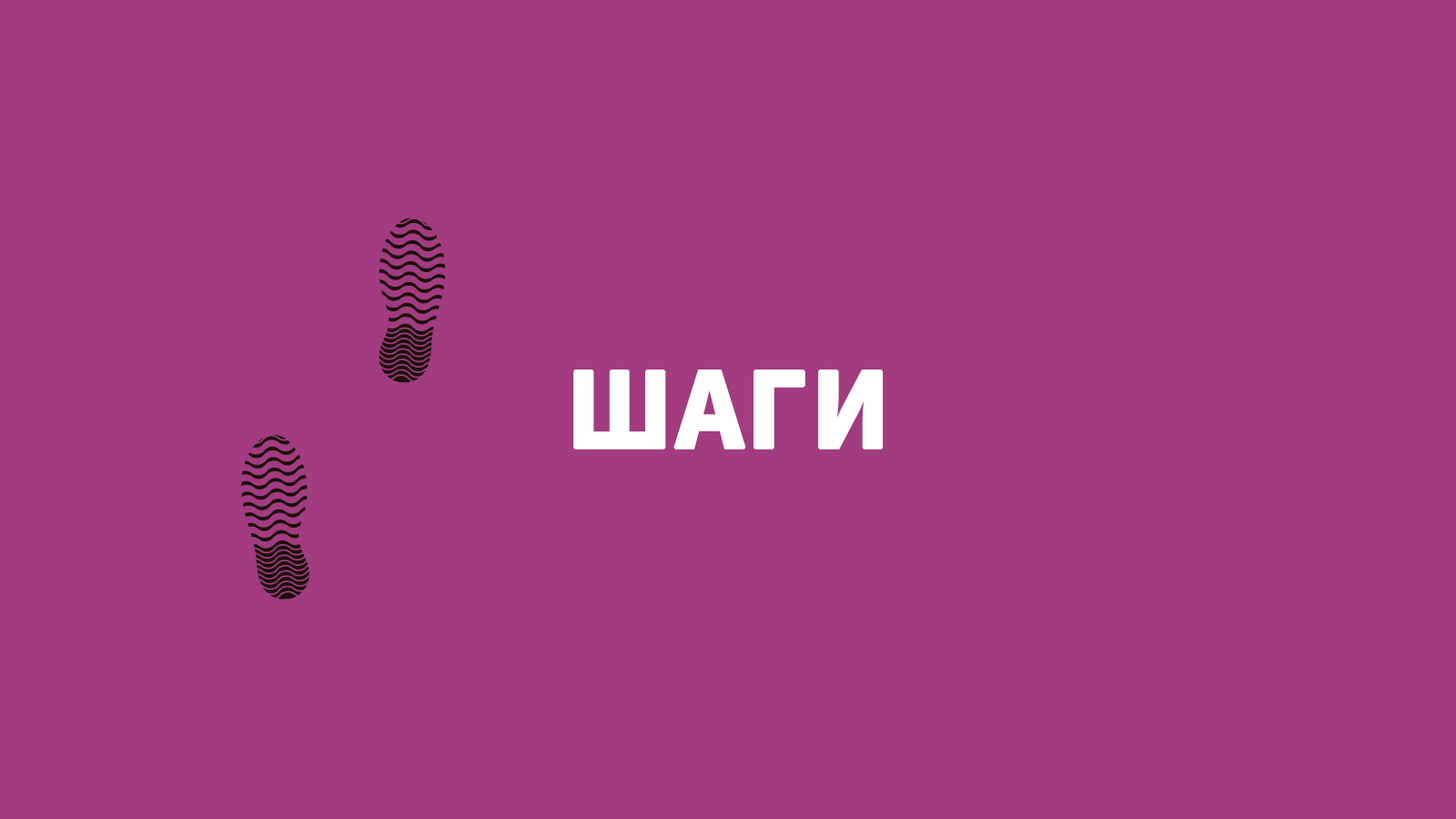
<style>
.page{position:relative;width:1456px;height:819px;background:#a23b80}
.page>*{position:absolute;margin:0}
.t1{font:117.4px "SourceSansPro-Bold";color:#ffffff;text-transform:uppercase;font-weight:bold}
</style>
<div class="page">
<p class="t1" style="left:573px;top:369px;width:311px;height:81px">шаги</p>
</div>
